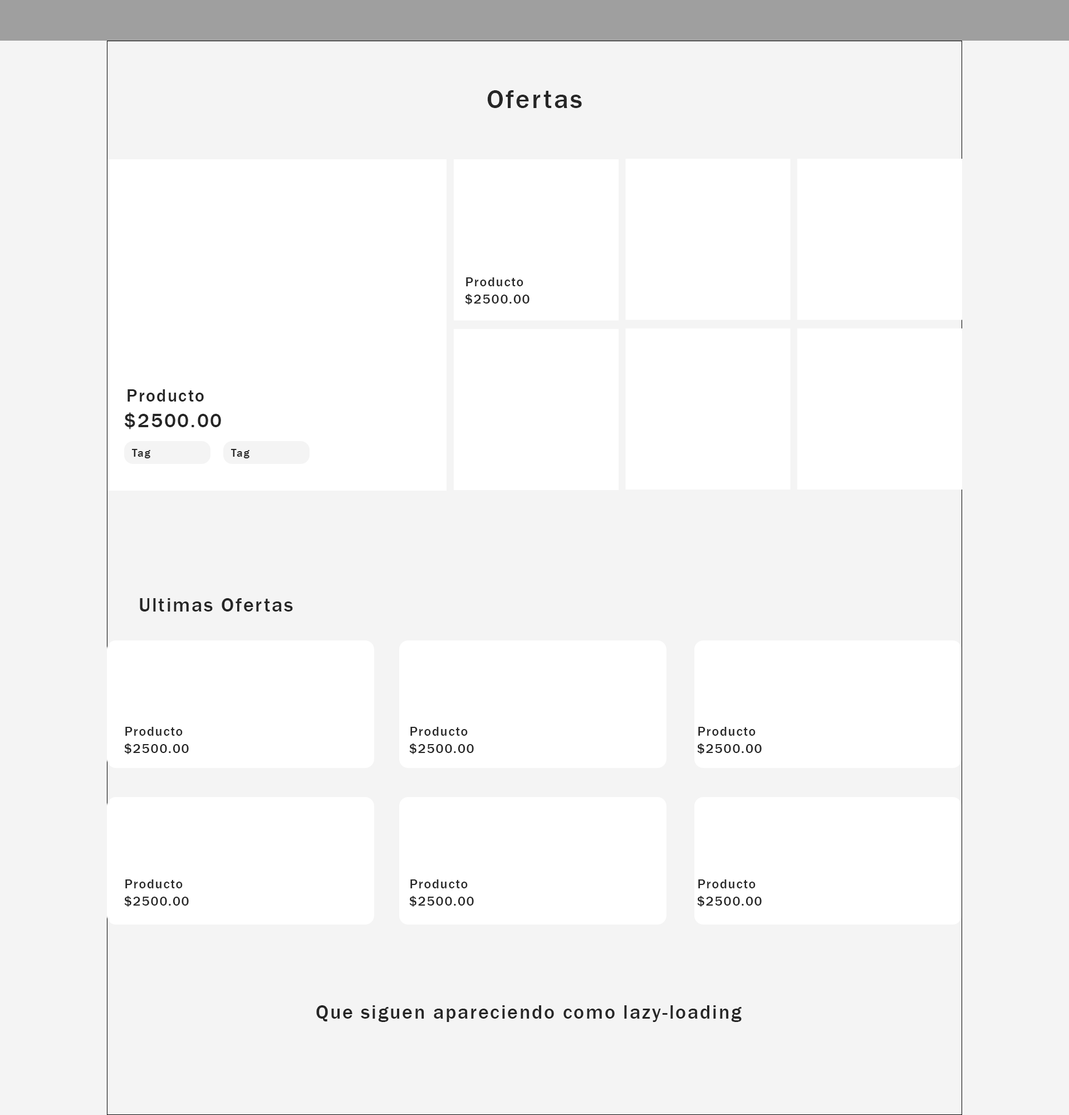
<style>
.page{position:relative;width:1069px;height:1115px;background:#f4f4f4}
.page>*{position:absolute;margin:0}
.t1{font:26.7px "FranklinGothic-Medium";letter-spacing:0.075em;color:#262626}
.t2{font:13.4px "FranklinGothic-Medium";letter-spacing:0.075em;color:#262626}
.t3{font:17.8px "FranklinGothic-Medium";letter-spacing:0.075em;color:#262626}
.t4{font:20.1px "FranklinGothic-Medium";letter-spacing:0.075em;color:#262626}
.t5{font:11.1px "FranklinGothic-Medium";letter-spacing:0.075em;color:#262626}
</style>
<div class="page">
<p class="t1" style="left:487px;top:90px;width:95px;height:18px">Ofertas</p>
<p class="t2" style="left:466px;top:277px;width:58px;height:9px">Producto</p>
<p class="t2" style="left:465px;top:294px;width:65px;height:11px">$2500.00</p>
<p class="t3" style="left:128px;top:389px;width:76px;height:13px">Producto</p>
<p class="t4" style="left:124px;top:412px;width:97px;height:17px">$2500.00</p>
<p class="t5" style="left:132px;top:449px;width:18px;height:9px">Tag</p>
<p class="t5" style="left:231px;top:449px;width:19px;height:9px">Tag</p>
<p class="t4" style="left:140px;top:598px;width:153px;height:14px">Ultimas Ofertas</p>
<p class="t2" style="left:125px;top:727px;width:58px;height:9px">Producto</p>
<p class="t2" style="left:410px;top:727px;width:58px;height:9px">Producto</p>
<p class="t2" style="left:698px;top:727px;width:58px;height:9px">Producto</p>
<p class="t2" style="left:124px;top:743px;width:65px;height:11px">$2500.00</p>
<p class="t2" style="left:409px;top:743px;width:65px;height:11px">$2500.00</p>
<p class="t2" style="left:697px;top:743px;width:65px;height:11px">$2500.00</p>
<p class="t2" style="left:125px;top:879px;width:58px;height:9px">Producto</p>
<p class="t2" style="left:410px;top:879px;width:58px;height:9px">Producto</p>
<p class="t2" style="left:698px;top:879px;width:58px;height:9px">Producto</p>
<p class="t2" style="left:124px;top:896px;width:65px;height:11px">$2500.00</p>
<p class="t2" style="left:409px;top:896px;width:65px;height:11px">$2500.00</p>
<p class="t2" style="left:697px;top:896px;width:65px;height:11px">$2500.00</p>
<p class="t4" style="left:316px;top:1005px;width:426px;height:17px">Que siguen apareciendo como lazy-loading</p>
</div>
